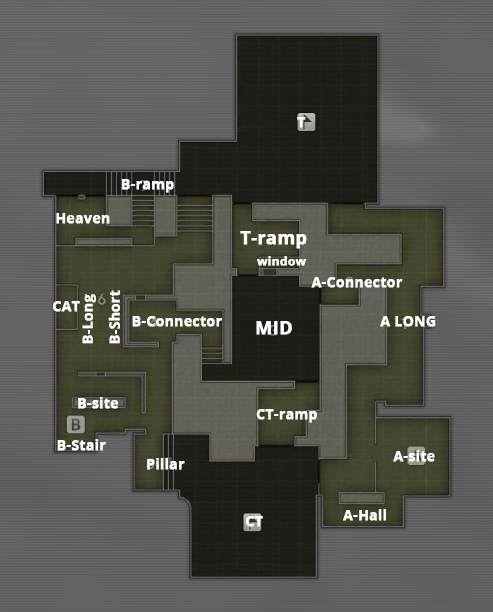
<style>
.page{position:relative;width:493px;height:612px}
.page>*{position:absolute;margin:0}
.t1{font:14px "OpenSans-Bold";color:#ffffff;font-weight:bold}
.t2{font:18px "OpenSans-Bold";color:#ffffff;font-weight:bold}
.t3{font:12px "OpenSans-Bold";color:#ffffff;font-weight:bold}
</style>
<div class="page">
<p class="t1" style="left:297px;top:117px;width:9px;height:11px">T</p>
<p class="t1" style="left:122px;top:179px;width:52px;height:14px">B-ramp</p>
<p class="t1" style="left:56px;top:213px;width:54px;height:11px">Heaven</p>
<p class="t2" style="left:240px;top:231px;width:67px;height:18px">T-ramp</p>
<p class="t3" style="left:257px;top:256px;width:50px;height:10px">window</p>
<p class="t1" style="left:311px;top:277px;width:92px;height:11px">A-Connector</p>
<p class="t1" style="left:82px;top:294px;width:14px;height:50px;rotate:-90deg">B-Long</p>
<p class="t1" style="left:108px;top:290px;width:12px;height:54px;rotate:-90deg">B-Short</p>
<p class="t1" style="left:53px;top:301px;width:27px;height:11px">CAT</p>
<p class="t1" style="left:132px;top:316px;width:90px;height:11px">B-Connector</p>
<p class="t1" style="left:380px;top:316px;width:56px;height:11px">A LONG</p>
<p class="t2" style="left:256px;top:321px;width:36px;height:14px">MID</p>
<p class="t1" style="left:78px;top:397px;width:40px;height:12px">B-site</p>
<p class="t1" style="left:256px;top:409px;width:61px;height:14px">CT-ramp</p>
<p class="t1" style="left:57px;top:439px;width:49px;height:12px">B-Stair</p>
<p class="t1" style="left:147px;top:458px;width:38px;height:12px">Pillar</p>
<p class="t1" style="left:393px;top:450px;width:42px;height:12px">A-site</p>
<p class="t1" style="left:343px;top:509px;width:43px;height:12px">A-Hall</p>
<p class="t1" style="left:246px;top:516px;width:17px;height:11px">CT</p>
</div>
